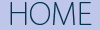
<style>
.page{position:relative;width:100px;height:30px;background:#bec6e9}
.page>*{position:absolute;margin:0}
.t1{font:30px "KozGoPro-ExtraLight";color:#06334d}
</style>
<div class="page">
<p class="t1" style="left:10px;top:2px;width:82px;height:23px">HOME</p>
</div>
